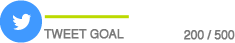
<style>
.page{position:relative;width:235px;height:43px;background:#ffffff}
.page>*{position:absolute;margin:0}
.t1{font:59px "Socialico";letter-spacing:-0.02em;color:#4099ff;font-weight:bold}
.t2{font:12px "Helvetica";letter-spacing:-0.02em;color:#797979;font-weight:bold}
</style>
<div class="page">
<p class="t1" style="left:0px;top:0px;width:42px;height:43px">l</p>
<p class="t2" style="left:44px;top:29px;width:80px;height:10px">TWEET GOAL</p>
<p class="t2" style="left:184px;top:30px;width:51px;height:10px">200 / 500</p>
</div>
